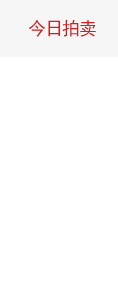
<style>
.page{position:relative;width:118px;height:300px;background:#ffffff}
.page>*{position:absolute;margin:0}
.t1{font:18px "SimHei";letter-spacing:-0.06em;color:#cd1f1e}
</style>
<div class="page">
<p class="t1" style="left:29px;top:20px;width:67px;height:17px">今日拍卖</p>
</div>
